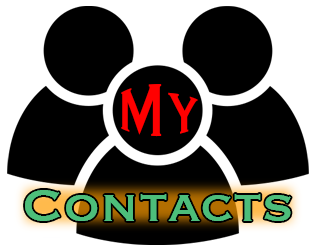
<style>
.page{position:relative;width:317px;height:252px;background:#000000}
.page>*{position:absolute;margin:0}
.t1{font:58.3px "Copperplate";color:#ff0000}
.t2{font:58.3px "Copperplate";color:#4dbe7a}
</style>
<div class="page">
<p class="t1" style="left:121px;top:84px;width:77px;height:53px">My</p>
<p class="t2" style="left:25px;top:190px;width:266px;height:31px">Contacts</p>
<p class="t2" style="left:25px;top:190px;width:266px;height:31px">Contacts</p>
</div>
